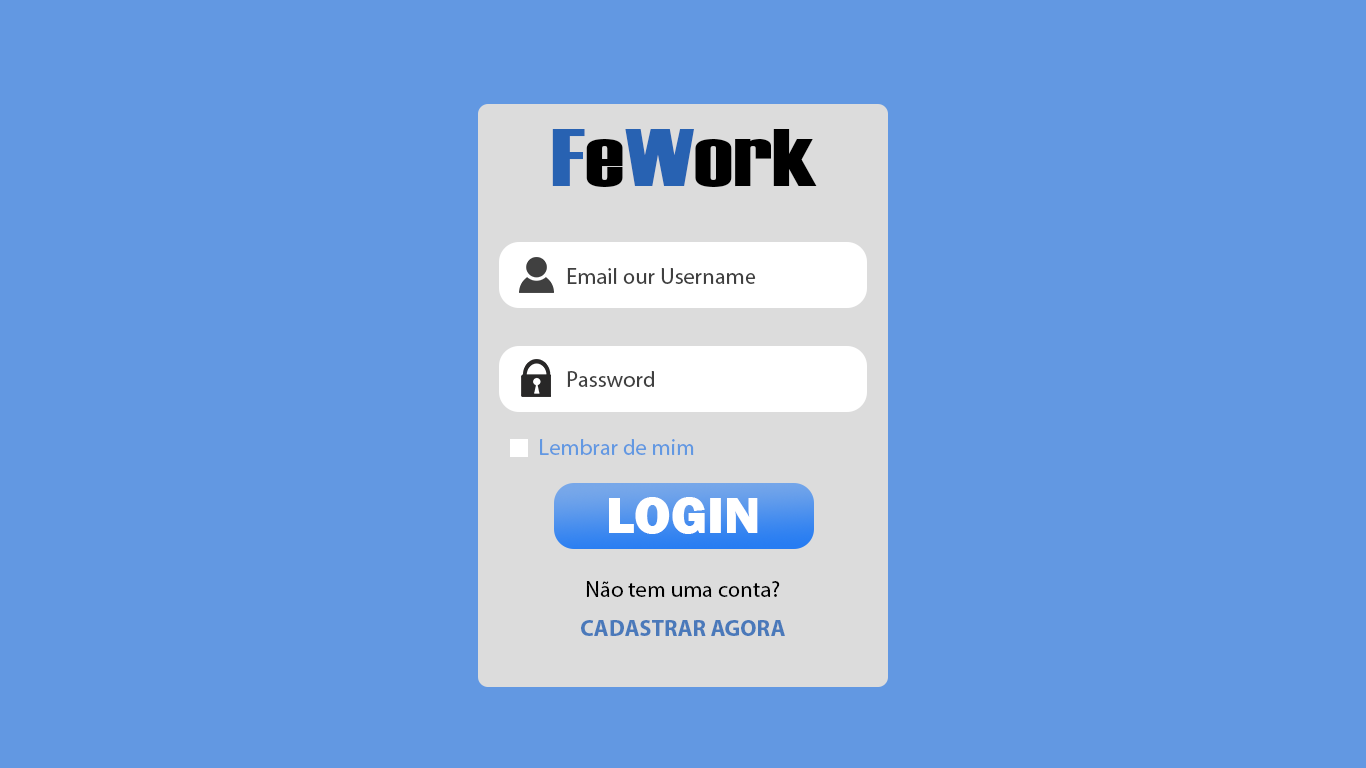
<style>
.page{position:relative;width:1366px;height:768px;background:#6298e2}
.page>*{position:absolute;margin:0}
.t1{font:82.3px "Haettenschweiler";color:#000000;scale:1.34 1}
.t2{font:82.3px "Haettenschweiler";color:#2862b2;scale:1.34 1}
.t3{font:22.7px "MyriadPro-Regular";color:#404040}
.t4{font:22.7px "MyriadPro-Regular";color:#6298e2}
.t5{font:52.6px "FranklinGothic-Heavy";color:#ffffff}
.t6{font:22.7px "MyriadPro-Regular";color:#000000}
.t7{font:22.7px "MyriadPro-Bold";color:#4a79ba}
</style>
<div class="page">
<p class="t1" style="left:552px;top:129px;width:265px;height:58px"><span class="t2">F</span>e<span class="t2">W</span>ork</p>
<p class="t3" style="left:567px;top:268px;width:189px;height:16px">Email our Username</p>
<p class="t3" style="left:567px;top:371px;width:87px;height:16px">Password</p>
<p class="t4" style="left:540px;top:439px;width:154px;height:16px">Lembrar de mim</p>
<p class="t5" style="left:609px;top:497px;width:149px;height:37px">LOGIN</p>
<p class="t6" style="left:586px;top:581px;width:194px;height:16px">Não tem uma conta?</p>
<p class="t7" style="left:581px;top:620px;width:204px;height:16px">CADASTRAR AGORA</p>
</div>
